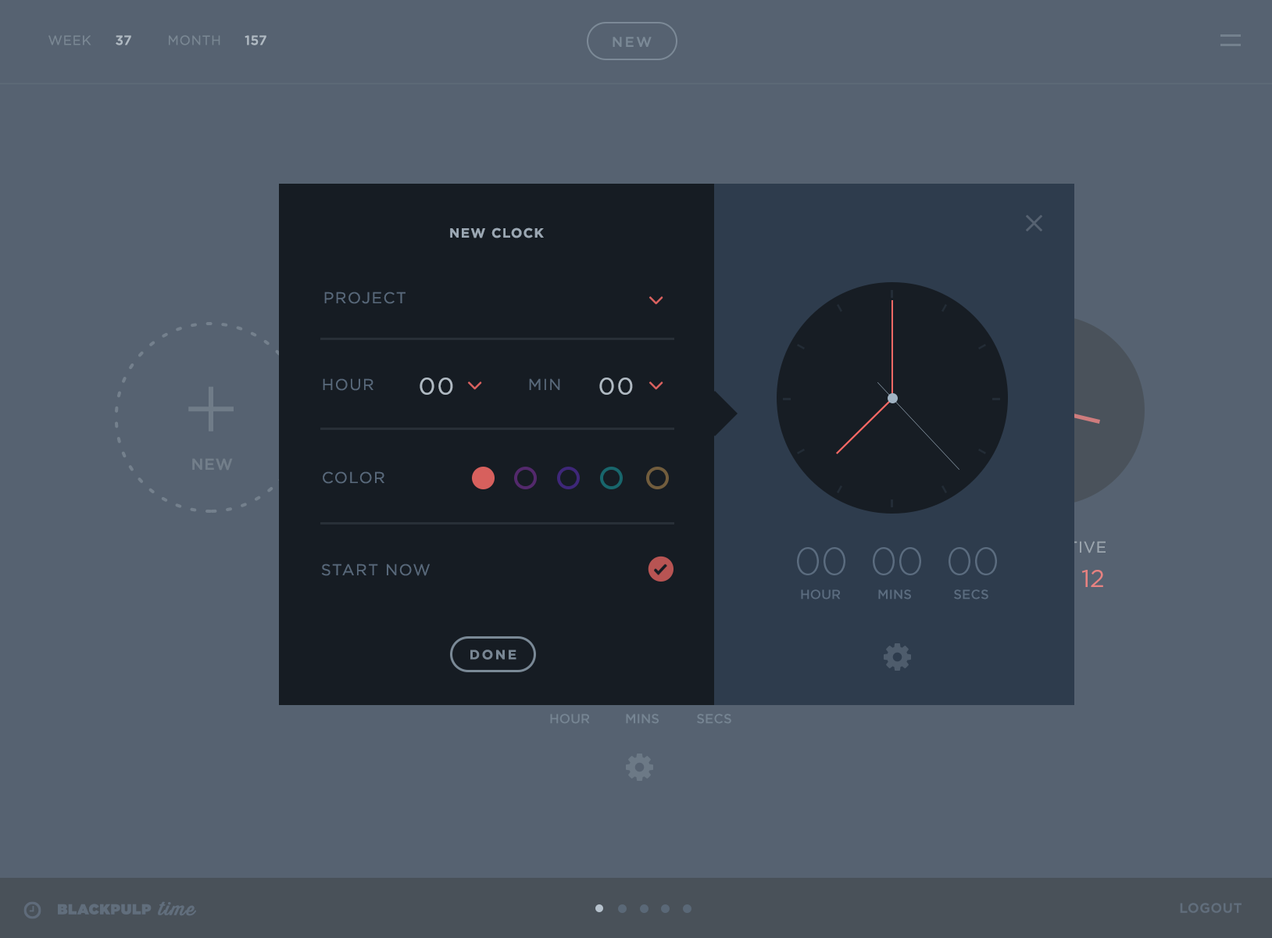
<style>
.page{position:relative;width:1272px;height:938px;background:#566271}
.page>*{position:absolute;margin:0}
.t1{font:13.3px "GothamHTF-Bold";letter-spacing:0.08em;color:#9ba7b3}
.t2{font:15.6px "GothamHTF-Book";letter-spacing:0.08em;color:#58687a}
.t3{font:23.4px "GothamHTF-Book";letter-spacing:0.08em;color:#b0bac3}
.t4{font:37.5px "GothamHTF-Light";color:#5b6c7f}
.t5{font:13px "GothamHTF-Medium";color:#5b6c7f}
.t6{font:13.3px "GothamHTF-Bold";letter-spacing:0.15em;color:#788693}
</style>
<div class="page">
<p class="t1" style="left:450px;top:227px;width:94px;height:11px">NEW CLOCK</p>
<p class="t2" style="left:324px;top:291px;width:81px;height:13px">PROJECT</p>
<p class="t3" style="left:420px;top:377px;width:33px;height:18px">00</p>
<p class="t3" style="left:599px;top:377px;width:34px;height:18px">00</p>
<p class="t2" style="left:323px;top:378px;width:50px;height:13px">HOUR</p>
<p class="t2" style="left:529px;top:378px;width:31px;height:12px">MIN</p>
<p class="t2" style="left:323px;top:471px;width:61px;height:13px">COLOR</p>
<p class="t4" style="left:797px;top:547px;width:200px;height:28px">00  00  00</p>
<p class="t2" style="left:321px;top:563px;width:109px;height:13px">START NOW</p>
<p class="t5" style="left:801px;top:589px;width:40px;height:10px">HOUR</p>
<p class="t5" style="left:878px;top:589px;width:33px;height:10px">MINS</p>
<p class="t5" style="left:954px;top:589px;width:34px;height:10px">SECS</p>
<p class="t6" style="left:470px;top:649px;width:46px;height:10px">DONE</p>
</div>
